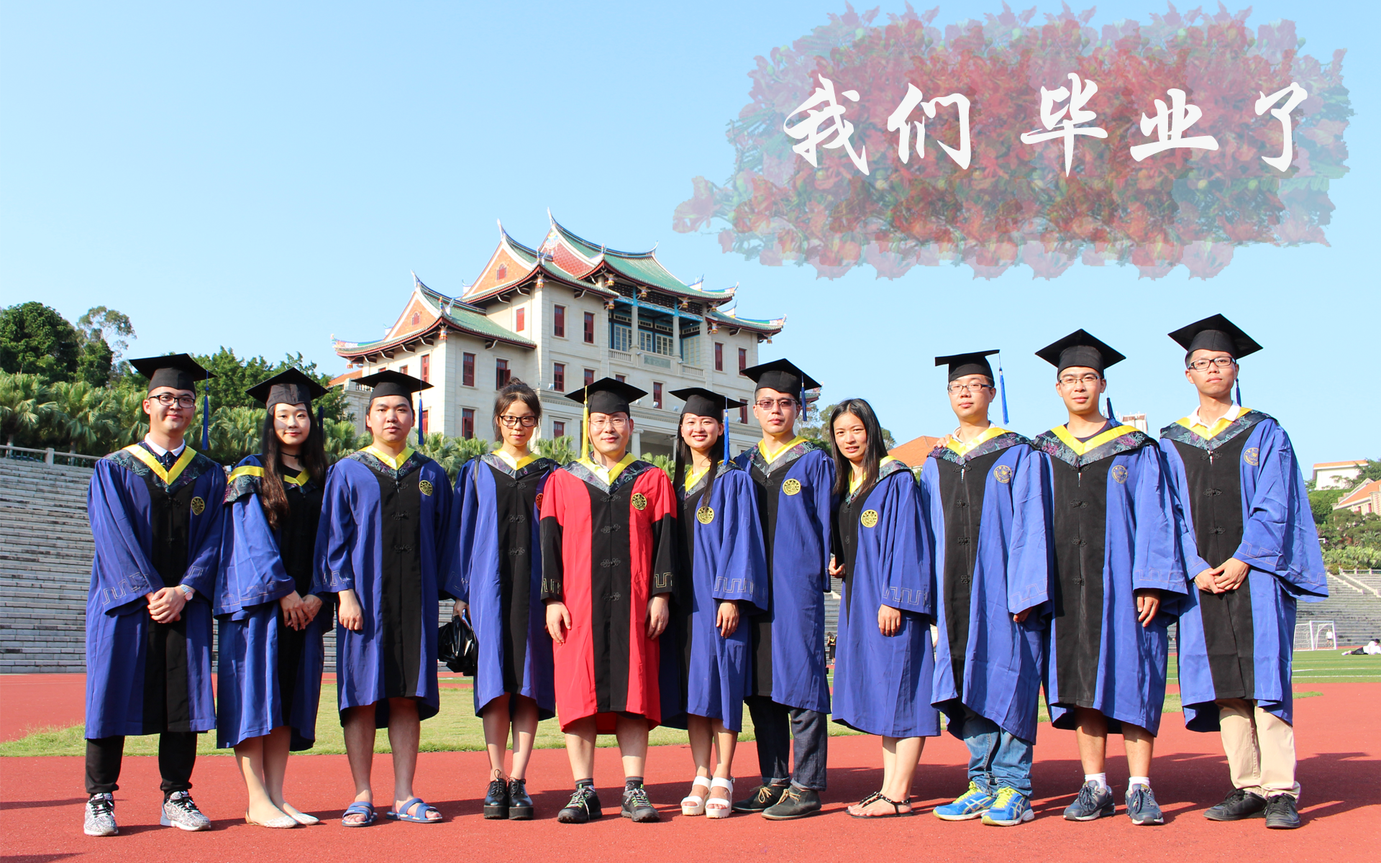
<style>
.page{position:relative;width:1381px;height:863px}
.page>*{position:absolute;margin:0}
.t1{font:107.9px "STXingkai";color:#f6f7f7}
</style>
<div class="page">
<p class="t1" style="left:783px;top:73px;width:525px;height:104px">我们 毕业了</p>
</div>
